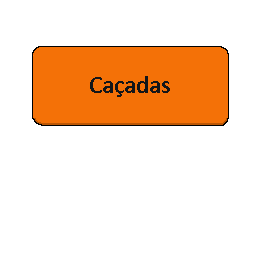
<style>
.page{position:relative;width:256px;height:256px;background:#ffffff}
.page>*{position:absolute;margin:0}
.t1{font:25px "Calibri-Bold";color:#141619}
</style>
<div class="page">
<p class="t1" style="left:90px;top:76px;width:80px;height:21px">Caçadas</p>
</div>
